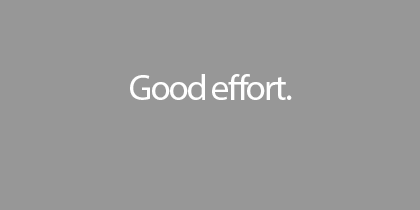
<style>
.page{position:relative;width:420px;height:210px;background:#979797}
.page>*{position:absolute;margin:0}
.t1{font:36px "MyriadPro-Regular";letter-spacing:-0.05em;color:#ffffff}
</style>
<div class="page">
<p class="t1" style="left:130px;top:74px;width:162px;height:26px">Good effort.</p>
</div>
